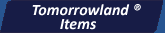
<style>
.page{position:relative;width:165px;height:33px;background:#171c46}
.page>*{position:absolute;margin:0}
.t1{font:16px "Calibri-BoldItalic";color:#ffffff}
</style>
<div class="page">
<p class="t1" style="left:32px;top:4px;width:109px;height:12px">Tomorrowland ®</p>
<p class="t1" style="left:60px;top:19px;width:36px;height:11px">Items</p>
</div>
